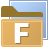
<style>
.page{position:relative;width:48px;height:48px}
.page>*{position:absolute;margin:0}
.t1{font:28px "SegoeUI-Bold";color:#fefeff;scale:1.2 1}
</style>
<div class="page">
<p class="t1" style="left:14px;top:23px;width:15px;height:20px">F</p>
</div>
